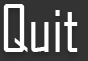
<style>
.page{position:relative;width:88px;height:61px;background:#333333}
.page>*{position:absolute;margin:0}
.t1{font:62.5px "AgencyFB-Reg";color:#ffffff}
</style>
<div class="page">
<p class="t1" style="left:3px;top:4px;width:75px;height:48px">Quit</p>
</div>
